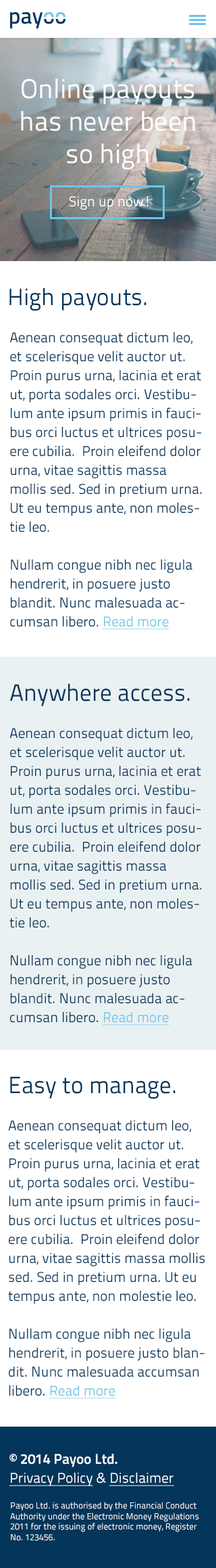
<style>
.page{position:relative;width:216px;height:1568px;background:#ffffff}
.page>*{position:absolute;margin:0}
.t1{font:27.1px "TitilliumText25L-400wt";color:#ffffff}
.t2{font:14.2px "TitilliumText25L-400wt";color:#ffffff}
.t3{font:23.7px "TitilliumText25L-400wt";color:#04355a}
.t4{font:14.2px/18.9px "TitilliumText25L-400wt";color:#04355a}
.t5{font:14.2px/18.9px "TitilliumText25L-400wt";color:#6fc5e7;text-decoration:underline}
.t6{font:14.2px/18.9px "TitilliumText25L-800wt";color:#ffffff}
.t7{font:14.2px/18.9px "TitilliumText25L-400wt";color:#ffffff;text-decoration:underline}
.t8{font:14.2px/18.9px "TitilliumText25L-400wt";color:#ffffff}
.t9{font:8.8px "TitilliumText25L-400wt";color:#ffffff}
</style>
<div class="page">
<p class="t1" style="left:21px;top:78px;width:174px;height:92px;text-align:center">Online payouts <br>has never been so high</p>
<p class="t2" style="left:70px;top:196px;width:79px;height:14px">Sign up now!</p>
<p class="t3" style="left:9px;top:287px;width:138px;height:24px">High payouts.</p>
<p class="t4" style="left:9px;top:332px;width:193px;height:298px">Aenean consequat dictum leo, et scelerisque velit auctor ut. Proin purus urna, lacinia et erat ut, porta sodales orci. Vestibulum ante ipsum primis in faucibus orci luctus et ultrices posuere cubilia.  Proin eleifend dolor urna, vitae sagittis massa mollis sed. Sed in pretium urna. Ut eu tempus ante, non molestie leo. <br><br>Nullam congue nibh nec ligula hendrerit, in posuere justo blandit. Nunc malesuada accumsan libero. <span class="t5">Read more</span></p>
<p class="t3" style="left:10px;top:683px;width:180px;height:23px">Anywhere access.</p>
<p class="t4" style="left:9px;top:728px;width:193px;height:297px">Aenean consequat dictum leo, et scelerisque velit auctor ut. Proin purus urna, lacinia et erat ut, porta sodales orci. Vestibulum ante ipsum primis in faucibus orci luctus et ultrices posuere cubilia.  Proin eleifend dolor urna, vitae sagittis massa mollis sed. Sed in pretium urna. Ut eu tempus ante, non molestie leo. <br><br>Nullam congue nibh nec ligula hendrerit, in posuere justo blandit. Nunc malesuada accumsan libero. <span class="t5">Read more</span></p>
<p class="t3" style="left:10px;top:1076px;width:166px;height:23px">Easy to manage.</p>
<p class="t4" style="left:8px;top:1120px;width:198px;height:279px">Aenean consequat dictum leo, et scelerisque velit auctor ut. Proin purus urna, lacinia et erat ut, porta sodales orci. Vestibulum ante ipsum primis in faucibus orci luctus et ultrices posuere cubilia.  Proin eleifend dolor urna, vitae sagittis massa mollis sed. Sed in pretium urna. Ut eu tempus ante, non molestie leo. <br><br>Nullam congue nibh nec ligula hendrerit, in posuere justo blandit. Nunc malesuada accumsan libero. <span class="t5">Read more</span></p>
<p class="t6" style="left:9px;top:1454px;width:166px;height:32px">© 2014 Payoo Ltd.<br><span class="t7">Privacy Policy</span><span class="t8"> &amp; </span><span class="t7">Disclaimer</span></p>
<p class="t9" style="left:10px;top:1502px;width:190px;height:39px">Payoo Ltd. is authorised by the Financial Conduct Authority under the Electronic Money Regulations 2011 for the issuing of electronic money, Register No. 123456.</p>
</div>
